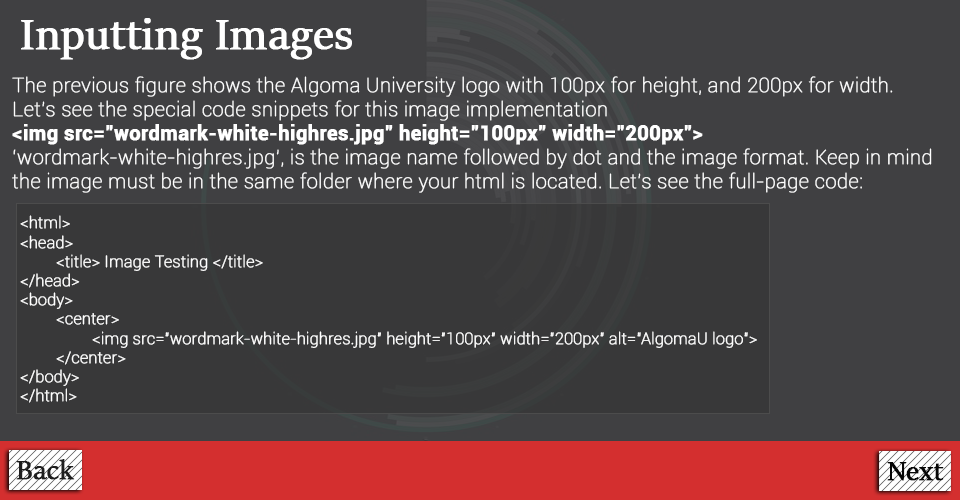
<style>
.page{position:relative;width:960px;height:500px;background:#404042}
.page>*{position:absolute;margin:0}
.t1{font:48px "SitkaBanner";color:#ffffff;font-weight:bold}
.t2{font:20px "Roboto-Thin";color:#ffffff;font-weight:bold}
.t3{font:20px "Roboto-Bold";color:#ffffff;font-weight:bold}
.t4{font:16px "Roboto-Thin";color:#ffffff;font-weight:bold}
.t5{font:30px "SitkaBanner";color:#1e1e1e;font-weight:bold}
.t6{font:30px "SitkaBanner";color:#060606;font-weight:bold}
</style>
<div class="page">
<p class="t1" style="left:21px;top:18px;width:331px;height:42px">Inputting Images</p>
<p class="t2" style="left:12px;top:76px;width:920px;height:117px">The previous figure shows the Algoma University logo with 100px for height, and 200px for width. Let’s see the special code snippets for this image implementation<br><span class="t3">&lt;img src="wordmark-white-highres.jpg" height="100px" width="200px"&gt;<br></span>‘wordmark-white-highres.jpg’, is the image name followed by dot and the image format. Keep in mind the image must be in the same folder where your html is located. Let’s see the full-page code:</p>
<p class="t4" style="left:20px;top:215px;width:737px;height:188px">&lt;html&gt;<br>&lt;head&gt;<br> &lt;title&gt; Image Testing &lt;/title&gt;<br>&lt;/head&gt;<br>&lt;body&gt;<br> &lt;center&gt;<br>  &lt;img src="wordmark-white-highres.jpg" height="100px" width="200px" alt=”AlgomaU logo”&gt;<br> &lt;/center&gt;<br>&lt;/body&gt;<br>&lt;/html&gt;</p>
<p class="t5" style="left:16px;top:459px;width:59px;height:21px">Back</p>
<p class="t6" style="left:887px;top:462px;width:57px;height:19px">Next</p>
</div>
